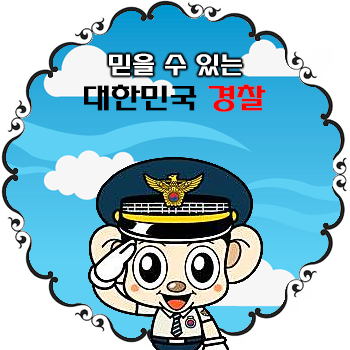
<style>
.page{position:relative;width:350px;height:350px;background:#ffffff}
.page>*{position:absolute;margin:0}
.t1{font:25px "HYsupB";letter-spacing:-0.03em;color:#ffffff}
.t2{font:30px "HYsupB";letter-spacing:-0.03em;color:#000000}
.t3{font:30px "HYsupB";letter-spacing:-0.03em;color:#ff0000}
</style>
<div class="page">
<p class="t1" style="left:109px;top:53px;width:133px;height:23px">믿을 수 있는</p>
<p class="t2" style="left:84px;top:84px;width:182px;height:28px">대한민국 <span class="t3">경찰</span></p>
</div>
